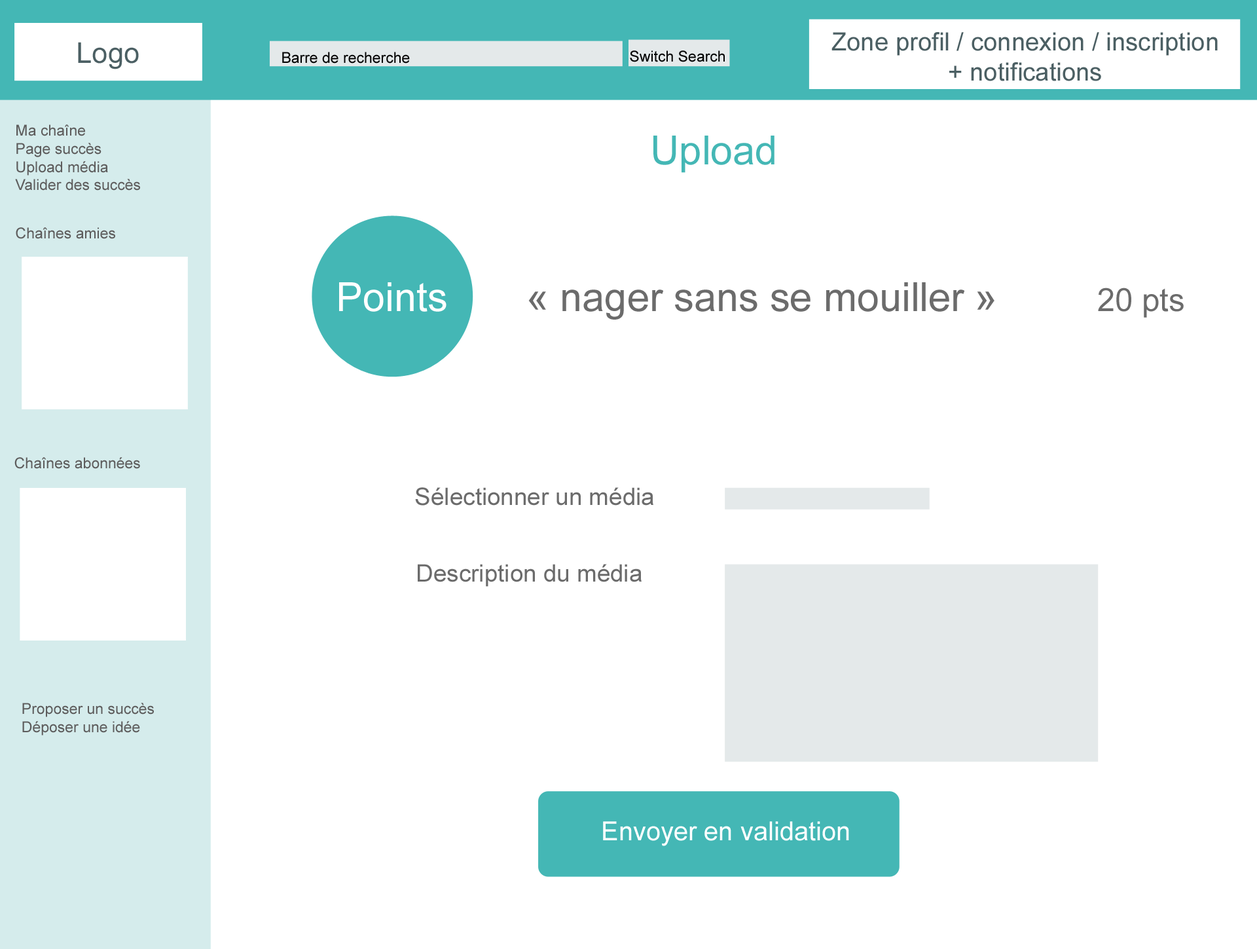
<style>
.page{position:relative;width:1257px;height:949px;background:#ffffff}
.page>*{position:absolute;margin:0}
.t1{font:28.4px "ArialMT";color:#4b5f63}
.t2{font:25.1px "ArialMT";color:#4b5f63}
.t3{font:15.1px "ArialMT";color:#000000}
.t4{font:15.1px "ArialMT";color:#5d5c5c}
.t5{font:40.2px "ArialMT";color:#44b7b5}
.t6{font:40.2px "ArialMT";color:#ffffff}
.t7{font:40.2px "ArialMT";color:#6b6b6b}
.t8{font:32.1px "ArialMT";color:#6b6b6b}
.t9{font:24.1px "ArialMT";color:#6b6b6b}
.t10{font:26.1px "ArialMT";color:#ffffff}
</style>
<div class="page">
<p class="t1" style="left:78px;top:42px;width:61px;height:27px">Logo</p>
<p class="t2" style="left:831px;top:32px;width:387px;height:49px;text-align:center">Zone profil / connexion / inscription<br>+ notifications</p>
<p class="t3" style="left:282px;top:52px;width:128px;height:12px">Barre de recherche</p>
<p class="t3" style="left:630px;top:50px;width:95px;height:12px">Switch Search</p>
<p class="t4" style="left:15px;top:124px;width:125px;height:67px">Ma chaîne<br>Page succès<br>Upload média<br>Valider des succès</p>
<p class="t5" style="left:653px;top:136px;width:121px;height:37px">Upload</p>
<p class="t4" style="left:16px;top:227px;width:99px;height:12px">Chaînes amies</p>
<p class="t6" style="left:339px;top:282px;width:107px;height:30px">Points</p>
<p class="t7" style="left:528px;top:282px;width:466px;height:37px">« nager sans se mouiller »</p>
<p class="t8" style="left:1098px;top:287px;width:86px;height:31px">20 pts</p>
<p class="t4" style="left:14px;top:457px;width:126px;height:12px">Chaînes abonnées</p>
<p class="t9" style="left:415px;top:487px;width:238px;height:18px">Sélectionner un média</p>
<p class="t9" style="left:418px;top:564px;width:224px;height:23px">Description du média</p>
<p class="t4" style="left:22px;top:702px;width:132px;height:33px">Proposer un succès<br>Déposer une idée</p>
<p class="t10" style="left:603px;top:821px;width:246px;height:25px">Envoyer en validation</p>
</div>
